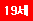
<style>
.page{position:relative;width:33px;height:21px;background:#ff0000}
.page>*{position:absolute;margin:0}
.t1{font:12px "Dotum";color:#ffffff;font-weight:bold}
</style>
<div class="page">
<p class="t1" style="left:5px;top:5px;width:23px;height:11px">19세</p>
</div>
